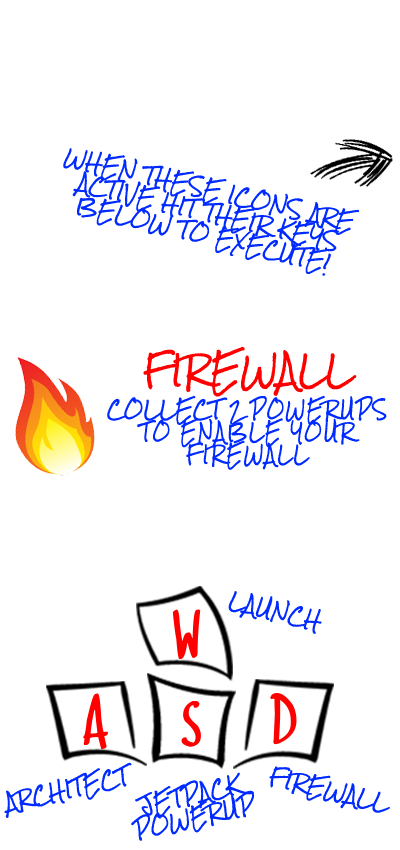
<style>
.page{position:relative;width:400px;height:850px;background:#ffffff}
.page>*{position:absolute;margin:0}
.t1{font:18.7px "RockSalt";color:#002aff}
.t2{font:32px "RockSalt";color:#ff0000}
.t3{font:18.7px "RockSalt";letter-spacing:0.1em;color:#002aff;scale:0.89 1}
</style>
<div class="page">
<p class="t1" style="left:63px;top:148px;width:297px;height:128px;text-align:center;rotate:13deg">WHEN THESE ICONS ARE <br>ACTIVE HIT THEIR KEYS<br>BELOW TO EXECUTE!</p>
<p class="t2" style="left:143px;top:346px;width:214px;height:51px">FIREWALL</p>
<p class="t3" style="left:107px;top:395px;width:280px;height:75px;text-align:center"><span class="t1">COLLECT 2 </span>POWERUPS<br> TO ENABLE YOUR <br>FIREWALL</p>
<p class="t1" style="left:228px;top:591px;width:94px;height:43px;rotate:13deg">LAUNCH</p>
<p class="t1" style="left:4px;top:762px;width:128px;height:56px;rotate:-13deg">ARCHITECT</p>
<p class="t1" style="left:131px;top:772px;width:123px;height:69px;text-align:center;rotate:-13deg">JETPACK<br>POWERUP</p>
<p class="t1" style="left:269px;top:766px;width:121px;height:47px;rotate:13deg">FIREWALL</p>
</div>
